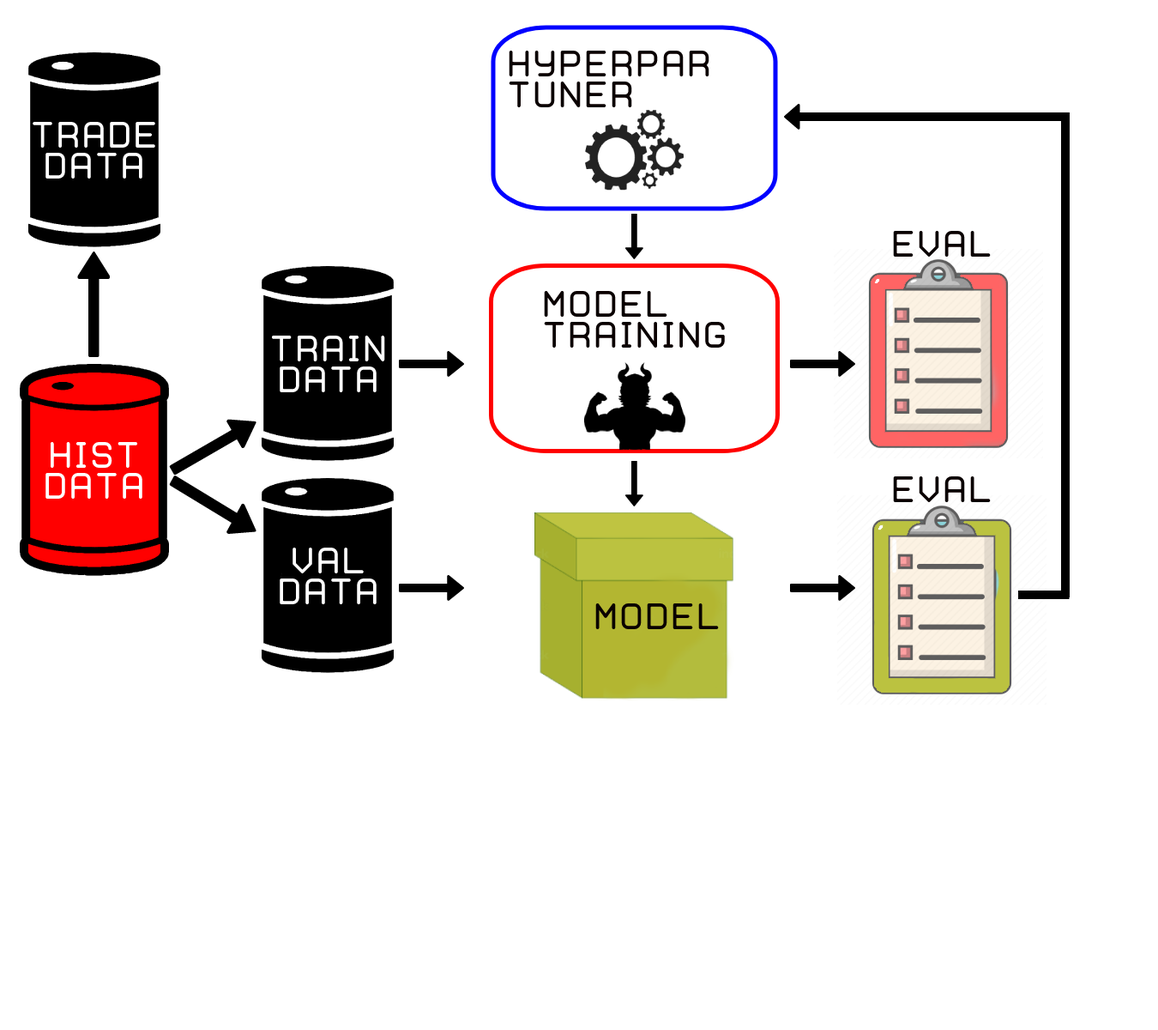
<style>
.page{position:relative;width:1158px;height:1030px;background:#ffffff}
.page>*{position:absolute;margin:0}
.t1{font:25.7px "WebHostingHub-Glyphs";color:#0a0000}
.t2{font:25.7px "WebHostingHub-Glyphs";color:#ffffff}
</style>
<div class="page">
<p class="t1" style="left:509px;top:51px;width:201px;height:56px">Hyperpar.<br>Tuner</p>
<p class="t2" style="left:33px;top:122px;width:122px;height:56px;text-align:center">TRADe<br>data</p>
<p class="t1" style="left:893px;top:231px;width:98px;height:26px">Eval.</p>
<p class="t1" style="left:544px;top:291px;width:181px;height:56px">Model<br>Training</p>
<p class="t2" style="left:271px;top:335px;width:114px;height:57px;text-align:center">Train<br>DATA</p>
<p class="t2" style="left:45px;top:442px;width:97px;height:56px;text-align:center">HISt<br>Data</p>
<p class="t1" style="left:893px;top:476px;width:98px;height:26px">Eval.</p>
<p class="t2" style="left:280px;top:547px;width:97px;height:57px;text-align:center">Val<br>DATA</p>
<p class="t1" style="left:595px;top:603px;width:124px;height:27px">Model</p>
</div>
